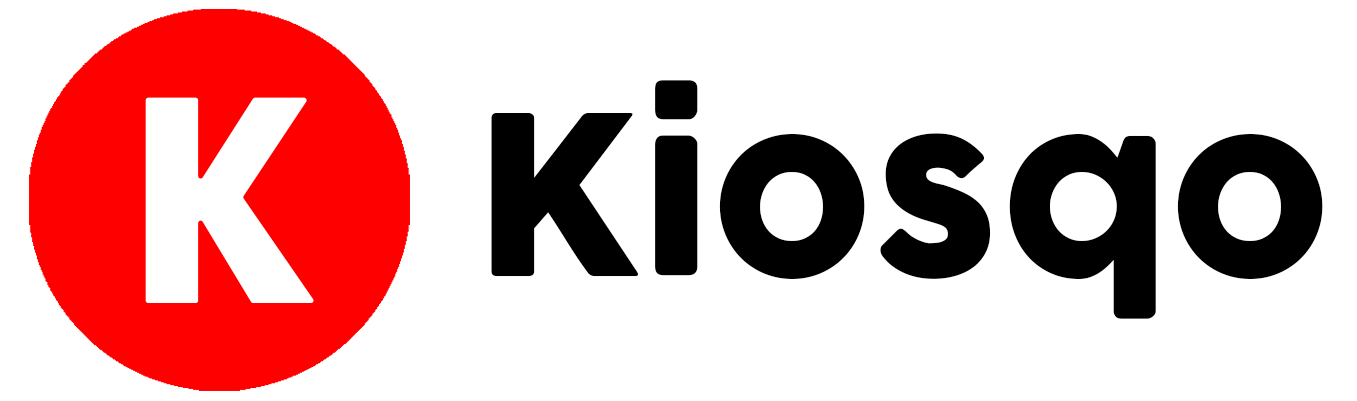
<style>
.page{position:relative;width:1357px;height:401px;background:#ffffff}
.page>*{position:absolute;margin:0}
.t1{font:220.4px "Cocogoose";color:#000000}
.t2{font:293.8px "NewakeDemo";color:#ffffff}
</style>
<div class="page">
<p class="t1" style="left:491px;top:80px;width:832px;height:239px">Kiosqo</p>
<p class="t2" style="left:145px;top:97px;width:169px;height:206px">K</p>
</div>
